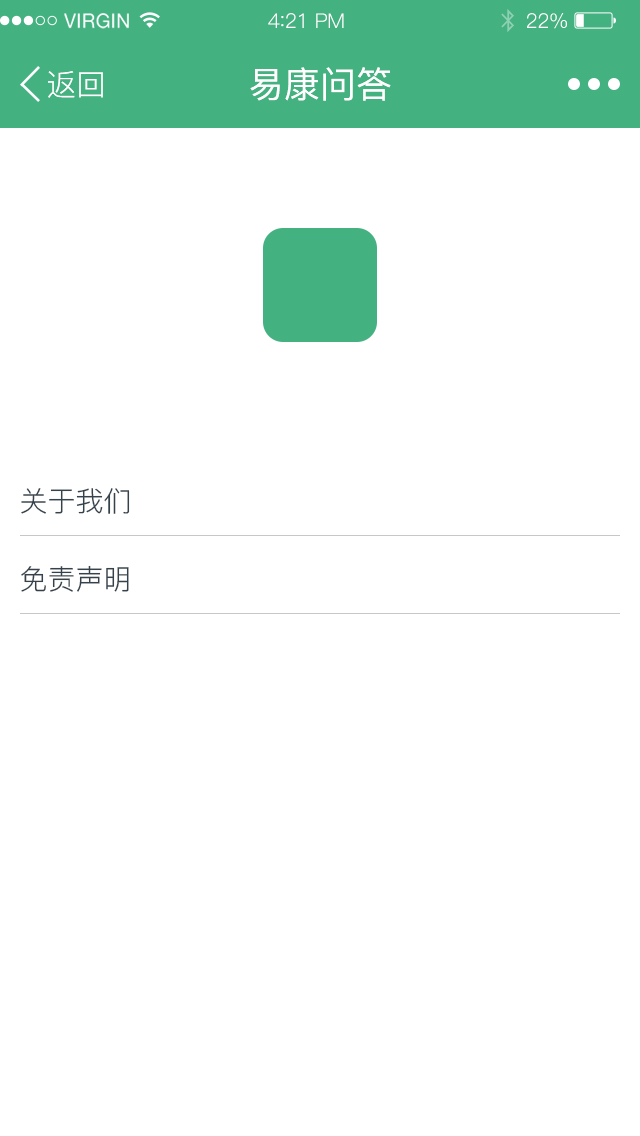
<style>
.page{position:relative;width:640px;height:1136px;background:#ffffff}
.page>*{position:absolute;margin:0}
.t1{font:19.6px "HelveticaNeue";letter-spacing:0.02em;color:#ffffff}
.t2{font:20.4px "PingFang-SC-Regular";letter-spacing:-0.02em;color:#ffffff}
.t3{font:22.1px "PingFang-SC-Regular";letter-spacing:-0.02em;color:#ffffff}
.t4{font:30px "PingFang-SC-Regular";color:#ffffff}
.t5{font:36px "PingFang-SC-Medium";color:#ffffff}
.t6{font:28px "PingFang-SC-Regular";color:#35424b}
</style>
<div class="page">
<p class="t1" style="left:64px;top:13px;width:65px;height:16px">VIRGIN</p>
<p class="t2" style="left:268px;top:13px;width:76px;height:15px">4<span class="t3">:</span>21 PM</p>
<p class="t2" style="left:527px;top:13px;width:40px;height:16px">22%</p>
<p class="t4" style="left:48px;top:71px;width:55px;height:27px">返回</p>
<p class="t5" style="left:250px;top:67px;width:141px;height:34px">易康问答</p>
<p class="t6" style="left:21px;top:488px;width:109px;height:26px">关于我们</p>
<p class="t6" style="left:21px;top:565px;width:108px;height:27px">免责声明</p>
</div>
